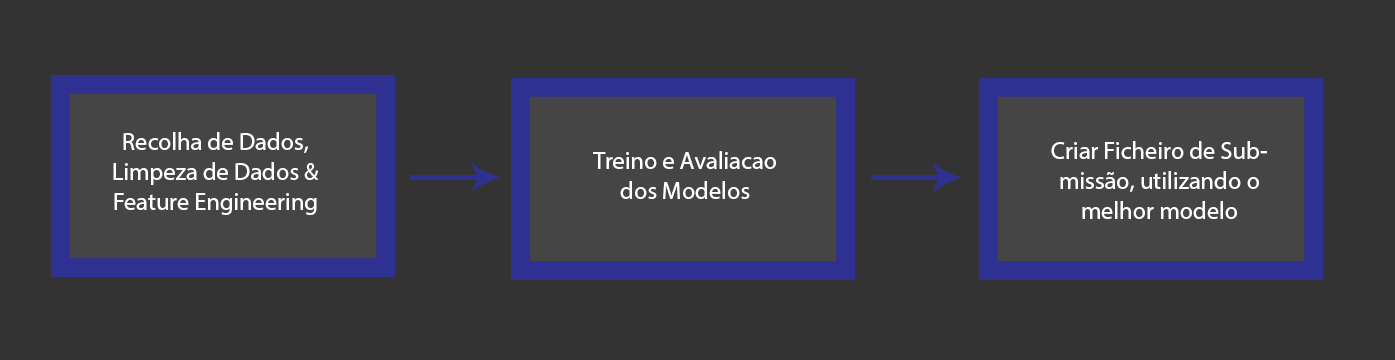
<style>
.page{position:relative;width:1395px;height:360px;background:#333333}
.page>*{position:absolute;margin:0}
.t1{font:25px "MyriadHebrew-Regular";color:#ffffff}
.t2{font:24.9px "MyriadHebrew-Regular";color:#ffffff}
</style>
<div class="page">
<p class="t1" style="left:113px;top:132px;width:206px;height:83px;text-align:center">Recolha de Dados, Limpeza de Dados &amp; Feature Engineering</p>
<p class="t2" style="left:1051px;top:141px;width:216px;height:78px;text-align:center">Criar Ficheiro de Submissão, utilizando o melhor modelo</p>
<p class="t1" style="left:593px;top:151px;width:183px;height:48px;text-align:center">Treino e Avaliacao dos Modelos</p>
</div>
